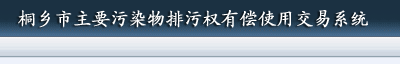
<style>
.page{position:relative;width:400px;height:64px}
.page>*{position:absolute;margin:0}
.t1{font:18px "KaiTi_GB2312";color:#ffffff;font-weight:bold}
</style>
<div class="page">
<p class="t1" style="left:18px;top:10px;width:350px;height:18px">桐乡市主要污染物排污权有偿使用交易系统</p>
</div>
